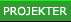
<style>
.page{position:relative;width:71px;height:22px;background:#339933}
.page>*{position:absolute;margin:0}
.t1{font:11px "Verdana";color:#ffffff}
</style>
<div class="page">
<p class="t1" style="left:4px;top:6px;width:63px;height:10px">PROJEKTER</p>
</div>
